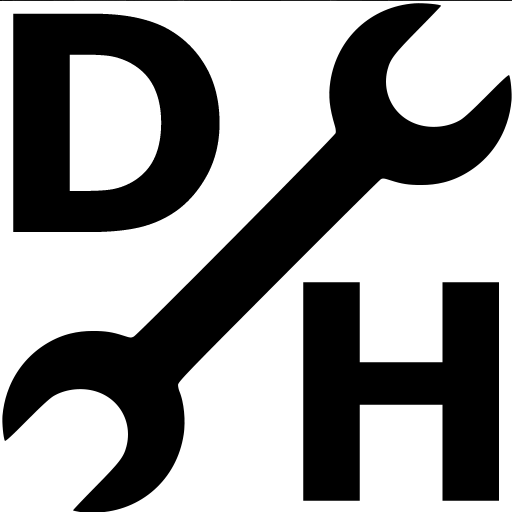
<style>
.page{position:relative;width:512px;height:512px;background:#ffffff}
.page>*{position:absolute;margin:0}
.t1{font:300px "Verdana-Bold";color:#000000}
</style>
<div class="page">
<p class="t1" style="left:13px;top:12px;width:207px;height:219px">D</p>
<p class="t1" style="left:303px;top:281px;width:196px;height:219px">H</p>
</div>
